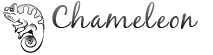
<style>
.page{position:relative;width:213px;height:55px;background:#ffffff}
.page>*{position:absolute;margin:0}
.t1{font:32px "BlackJackRegular"}
</style>
<div class="page">
<p class="t1" style="left:52px;top:1px;width:146px;height:28px">Chameleon</p>
</div>
